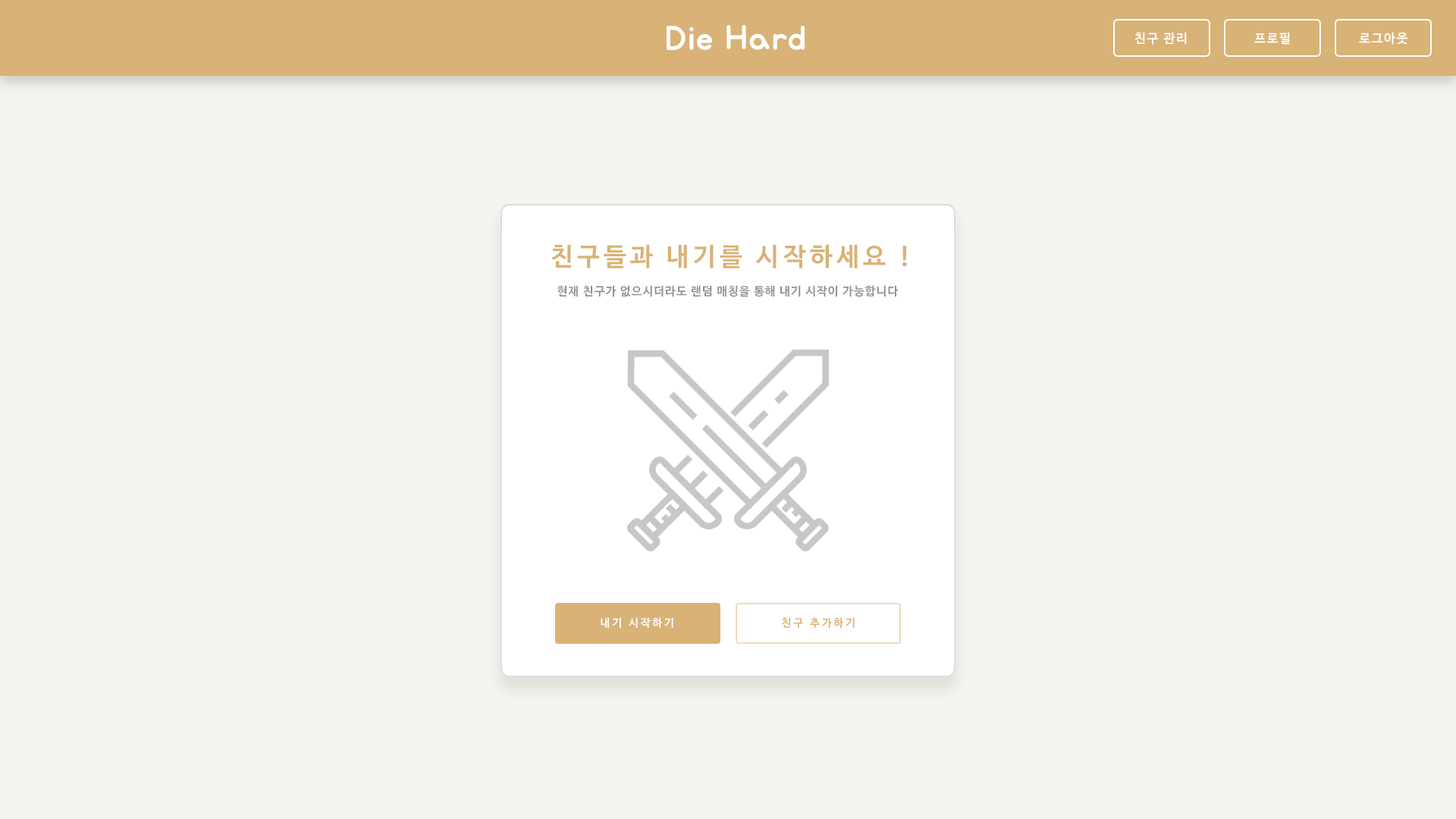
<style>
.page{position:relative;width:1456px;height:819px;background:#f5f3ee}
.page>*{position:absolute;margin:0}
.t1{font:12.6px "NanumBarunGothicBold";letter-spacing:0.1em;color:#fefefe}
.t2{font:12.6px "NanumBarunGothicBold";letter-spacing:0.1em;color:#ffffff}
.t3{font:25.4px "NanumBarunGothicBold";letter-spacing:0.16em;color:#d8b276}
.t4{font:11.8px "NanumBarunGothicBold";letter-spacing:0.06em;color:#918f8f}
.t5{font:11px "NanumBarunGothicBold";letter-spacing:0.2em;color:#ffffff}
.t6{font:11px "NanumBarunGothicBold";letter-spacing:0.2em;color:#d8b276}
</style>
<div class="page">
<p class="t1" style="left:1134px;top:32px;width:53px;height:13px">친구 관리</p>
<p class="t2" style="left:1254px;top:32px;width:36px;height:13px">프로필</p>
<p class="t1" style="left:1359px;top:32px;width:49px;height:13px">로그아웃</p>
<p class="t3" style="left:551px;top:244px;width:356px;height:24px">친구들과 내기를 시작하세요 !</p>
<p class="t4" style="left:557px;top:285px;width:342px;height:12px">현재 친구가 없으시더라도 랜덤 매칭을 통해 내기 시작이 가능합니다</p>
<p class="t5" style="left:601px;top:617px;width:72px;height:11px">내기 시작하기</p>
<p class="t6" style="left:782px;top:617px;width:73px;height:11px">친구 추가하기</p>
</div>
